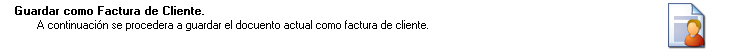
<style>
.page{position:relative;width:730px;height:52px;background:#ffffff}
.page>*{position:absolute;margin:0}
.t1{font:11.4px "MS Sans Serif";color:#000000;font-weight:bold}
.t2{font:11.4px "MS Sans Serif";color:#000000}
</style>
<div class="page">
<p class="t1" style="left:15px;top:6px;width:189px;height:9px">Guardar como Factura de Cliente.</p>
<p class="t2" style="left:37px;top:20px;width:391px;height:11px">A continuación se procedera a guardar el docuento actual como factura de cliente.</p>
</div>
